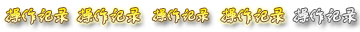
<style>
.page{position:relative;width:360px;height:32px;background:#ffffff}
.page>*{position:absolute;margin:0}
.t1{font:18px "FZSTK--GBK1-0";letter-spacing:-0.14em;font-weight:bold}
.t2{font:16px "FZSTK--GBK1-0";letter-spacing:-0.14em;font-weight:bold}
.t3{font:18px "FZSTK--GBK1-0";letter-spacing:-0.14em;color:#f1f1f1;font-weight:bold}
</style>
<div class="page">
<p class="t1" style="left:5px;top:8px;width:63px;height:16px">操作记录</p>
<p class="t1" style="left:77px;top:8px;width:63px;height:16px">操作记录</p>
<p class="t2" style="left:152px;top:8px;width:57px;height:15px">操作记录</p>
<p class="t1" style="left:221px;top:8px;width:63px;height:16px">操作记录</p>
<p class="t3" style="left:293px;top:8px;width:63px;height:16px">操作记录</p>
</div>
